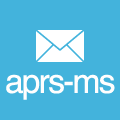
<style>
.page{position:relative;width:120px;height:120px;background:#43b3dc}
.page>*{position:absolute;margin:0}
.t1{font:33.3px "Helvetica";letter-spacing:-0.05em;color:#fffefe}
</style>
<div class="page">
<p class="t1" style="left:6px;top:74px;width:109px;height:26px">aprs-ms</p>
</div>
